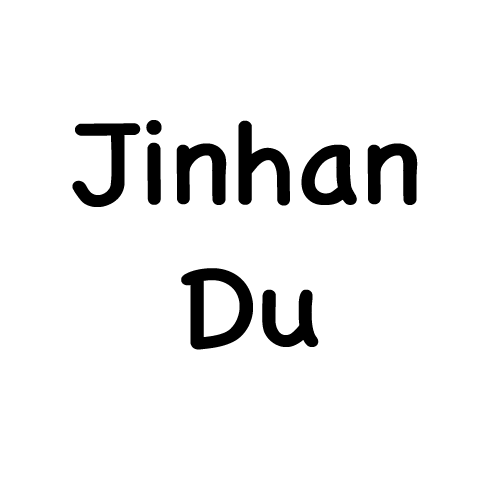
<style>
.page{position:relative;width:500px;height:500px;background:#ffffff}
.page>*{position:absolute;margin:0}
.t1{font:120px "ChalkboardSE-Regular";color:#000000}
</style>
<div class="page">
<p class="t1" style="left:72px;top:120px;width:346px;height:87px">Jinhan</p>
<p class="t1" style="left:181px;top:268px;width:138px;height:82px">Du</p>
</div>
